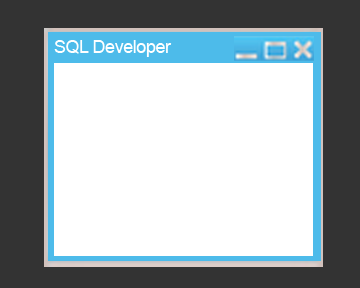
<style>
.page{position:relative;width:360px;height:288px;background:#ffffff}
.page>*{position:absolute;margin:0}
.t1{font:18px "ArialMT";letter-spacing:-0.025em;color:#ffffff}
</style>
<div class="page">
<p class="t1" style="left:54px;top:40px;width:118px;height:17px">SQL Developer</p>
</div>
